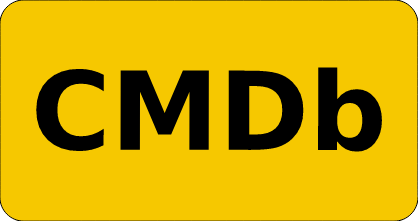
<style>
.page{position:relative;width:418px;height:221px;background:#f6c800}
.page>*{position:absolute;margin:0}
.t1{font:108.7px "DejaVuSans-Bold";color:#000000}
</style>
<div class="page">
<p class="t1" style="left:36px;top:67px;width:346px;height:85px">CMDb</p>
</div>
